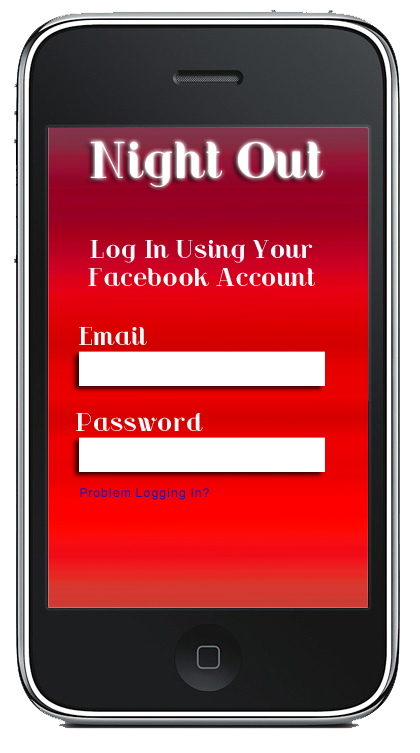
<style>
.page{position:relative;width:420px;height:753px;background:#ffffff}
.page>*{position:absolute;margin:0}
.t1{font:48px "RiotSquad";letter-spacing:0.075em;color:#ffffff}
.t2{font:24px "RiotSquad";letter-spacing:0.075em;color:#fbfbfb}
.t3{font:12px "ArialMT";letter-spacing:0.075em;color:#021ad1}
</style>
<div class="page">
<p class="t1" style="left:90px;top:141px;width:233px;height:46px">Night Out</p>
<p class="t2" style="left:88px;top:240px;width:227px;height:46px;text-align:center">Log In Using Your<br>Facebook Account</p>
<p class="t2" style="left:79px;top:327px;width:68px;height:18px">Email</p>
<p class="t2" style="left:76px;top:413px;width:127px;height:18px">Password</p>
<p class="t3" style="left:80px;top:488px;width:129px;height:12px">Problem Logging In?</p>
</div>
